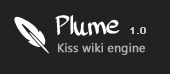
<style>
.page{position:relative;width:170px;height:74px;background:#222222}
.page>*{position:absolute;margin:0}
.t1{font:25px "PlumePLUME";color:#ffffff;font-weight:bold}
.t2{font:10px "ArialMT";color:#bfbfbf;font-weight:bold}
.t3{font:12px "SegoeUI";color:#b2b2b2;font-weight:bold}
</style>
<div class="page">
<p class="t1" style="left:55px;top:15px;width:65px;height:21px">Plume</p>
<p class="t2" style="left:130px;top:27px;width:16px;height:7px">1.0</p>
<p class="t3" style="left:58px;top:43px;width:87px;height:12px">Kiss wiki engine</p>
</div>
